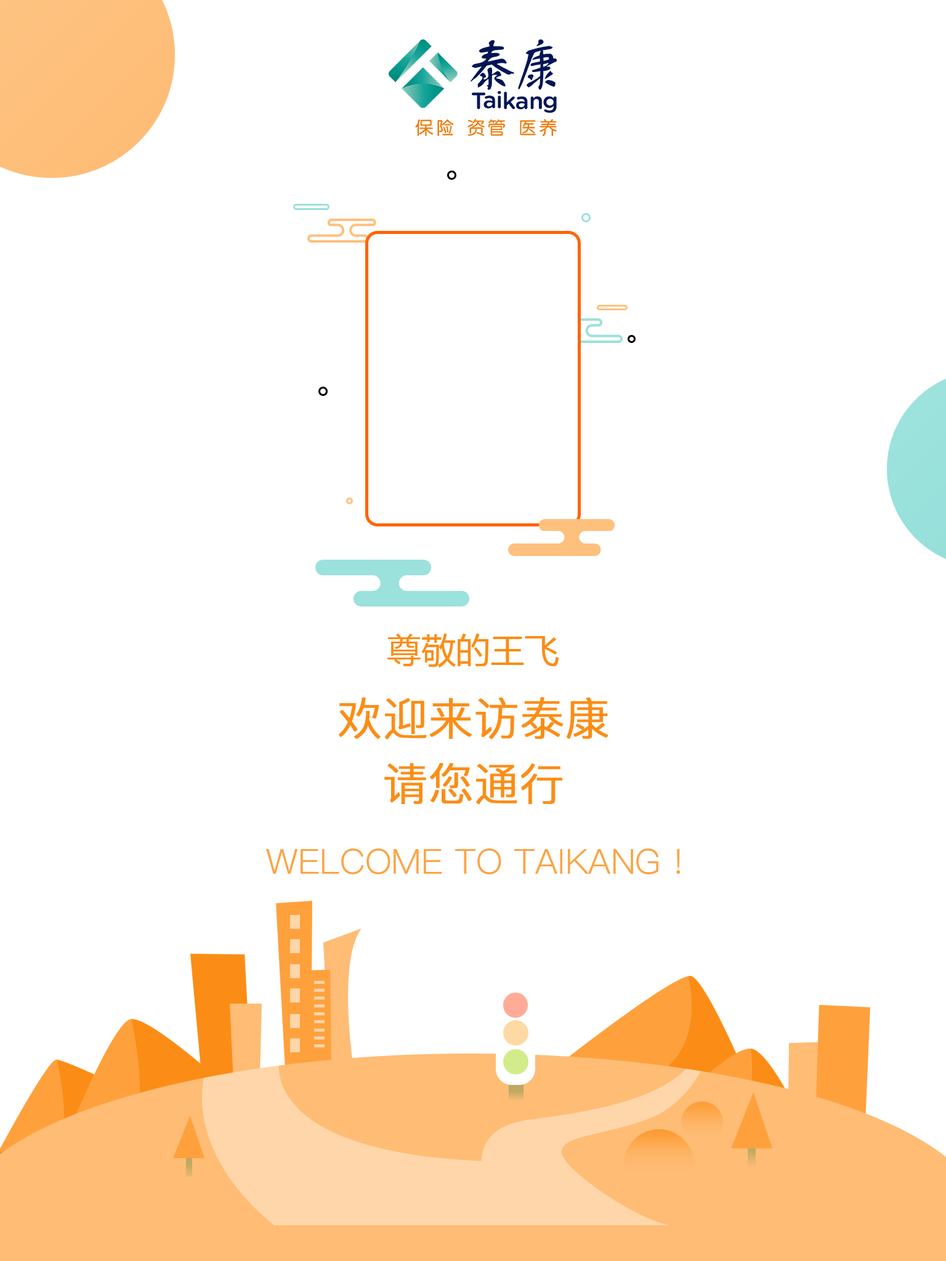
<style>
.page{position:relative;width:946px;height:1261px;background:#ffffff}
.page>*{position:absolute;margin:0}
.t1{font:34.5px "MicrosoftYaHei";color:#fb8d16;text-transform:uppercase}
.t2{font:44.3px "PingFang-SC-Regular";color:#fb8d16;font-weight:bold}
.t3{font:34.5px "PingFang-SC-Regular";color:#fca445;text-transform:uppercase}
</style>
<div class="page">
<p class="t1" style="left:387px;top:634px;width:172px;height:33px">尊敬的王飞</p>
<p class="t2" style="left:339px;top:697px;width:269px;height:42px">欢迎来访泰康</p>
<p class="t2" style="left:384px;top:763px;width:178px;height:41px">请您通行</p>
<p class="t3" style="left:266px;top:848px;width:414px;height:26px">Welcome to Taikang !</p>
</div>
